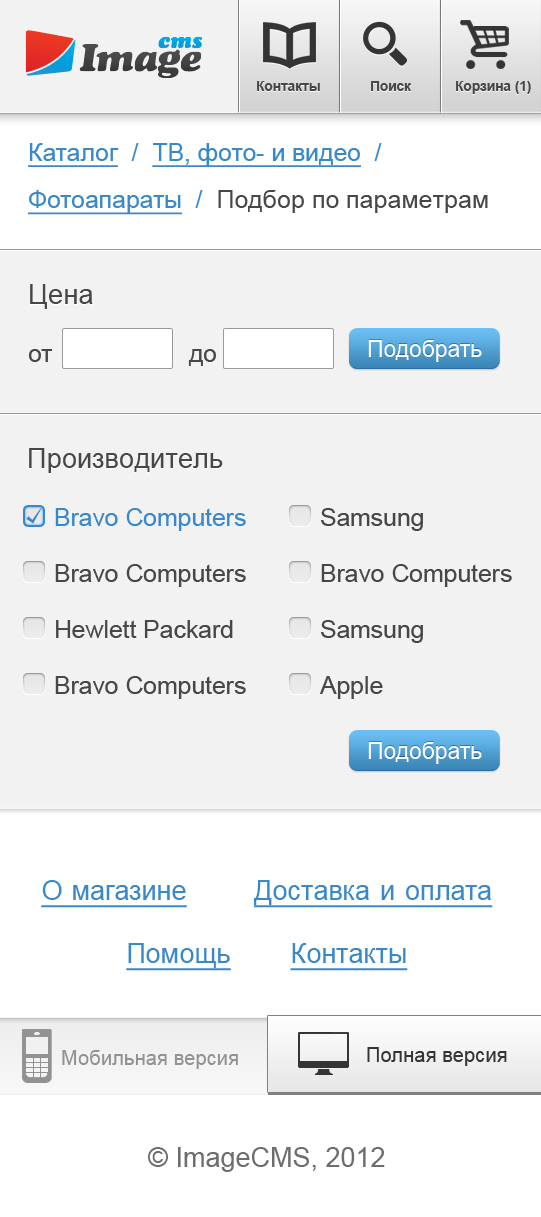
<style>
.page{position:relative;width:541px;height:1217px;background:#f2f2f2}
.page>*{position:absolute;margin:0}
.t1{font:13.6px "Arial-BoldMT";color:#474749}
.t2{font:25px/47.2px "ArialMT";color:#474749}
.t3{font:24.8px/63px "ArialMT";color:#3a88cc;text-decoration:underline}
.t4{font:24.8px/63px "ArialMT";color:#3a88cc}
.t5{font:24.8px/47.2px "ArialMT";color:#3a88cc;text-decoration:underline}
.t6{font:24.8px/47.2px "ArialMT";color:#3a88cc}
.t7{font:27.3px "ArialMT";color:#474749}
.t8{font:22.5px "ArialMT";letter-spacing:0.01em;color:#ffffff}
.t9{font:24.7px "ArialMT";color:#474749}
.t10{font:24.7px "ArialMT";color:#3a88cc}
.t11{font:27px/63px "ArialMT";color:#3a88cc;text-decoration:underline}
.t12{font:20.3px "ArialMT";color:#343434}
.t13{font:20.3px "ArialMT";color:#929292}
.t14{font:27px "ArialMT";color:#6d6d6d}
</style>
<div class="page">
<p class="t1" style="left:257px;top:81px;width:63px;height:10px">Контакты</p>
<p class="t1" style="left:371px;top:81px;width:40px;height:10px">Поиск</p>
<p class="t1" style="left:456px;top:81px;width:75px;height:13px">Корзина (1)</p>
<p class="t2" style="left:28px;top:143px;width:460px;height:72px"><span class="t3">Каталог</span><span class="t4">  /  </span><span class="t3">ТВ, фото- и видео</span><span class="t4">  /  </span><span class="t5">Фотоапараты  </span><span class="t6">/  </span>Подбор по параметрам</p>
<p class="t7" style="left:30px;top:284px;width:63px;height:25px">Цена</p>
<p class="t8" style="left:368px;top:340px;width:114px;height:22px">Подобрать</p>
<p class="t9" style="left:28px;top:349px;width:25px;height:13px">от</p>
<p class="t9" style="left:188px;top:349px;width:28px;height:17px">до</p>
<p class="t7" style="left:29px;top:448px;width:194px;height:25px">Производитель</p>
<p class="t10" style="left:55px;top:508px;width:191px;height:23px">Bravo Computers</p>
<p class="t9" style="left:321px;top:508px;width:102px;height:23px">Samsung</p>
<p class="t9" style="left:55px;top:564px;width:191px;height:23px">Bravo Computers</p>
<p class="t9" style="left:321px;top:564px;width:191px;height:23px">Bravo Computers</p>
<p class="t9" style="left:56px;top:620px;width:177px;height:18px">Hewlett Packard</p>
<p class="t9" style="left:321px;top:620px;width:102px;height:23px">Samsung</p>
<p class="t9" style="left:55px;top:676px;width:191px;height:23px">Bravo Computers</p>
<p class="t9" style="left:320px;top:676px;width:63px;height:23px">Apple</p>
<p class="t8" style="left:368px;top:742px;width:114px;height:22px">Подобрать</p>
<p class="t11" style="left:41px;top:880px;width:452px;height:91px;text-align:center">Омагазине         Доставкаиоплата           <br>Помощь        Контакты</p>
<p class="t12" style="left:367px;top:1047px;width:140px;height:19px">Полная версия</p>
<p class="t13" style="left:62px;top:1050px;width:176px;height:19px">Мобильная версия</p>
<p class="t14" style="left:148px;top:1147px;width:237px;height:25px">© ImageCMS, 2012</p>
</div>
